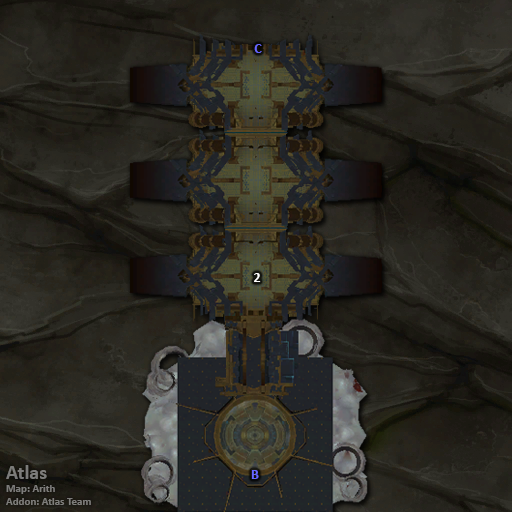
<style>
.page{position:relative;width:512px;height:512px}
.page>*{position:absolute;margin:0}
.t1{font:14px "Calibri-Bold";color:#6666ff}
.t2{font:14px "Calibri-Bold";color:#ffffff}
.t3{font:11px "Calibri-Bold";color:#7d7c7a}
.t4{font:20px "Calibri-Bold";color:#7d7c7a}
</style>
<div class="page">
<p class="t1" style="left:254px;top:44px;width:8px;height:9px">C</p>
<p class="t2" style="left:254px;top:273px;width:7px;height:9px">2</p>
<p class="t3" style="left:6px;top:465px;width:85px;height:40px"><span class="t4">Atlas<br></span>Map: Arith<br>Addon: Atlas Team</p>
<p class="t1" style="left:251px;top:470px;width:8px;height:9px">B</p>
</div>
